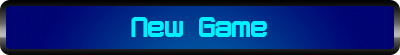
<style>
.page{position:relative;width:400px;height:55px}
.page>*{position:absolute;margin:0}
.t1{font:30px "Dopenakedfoulphat";color:#00f0ff}
</style>
<div class="page">
<p class="t1" style="left:131px;top:17px;width:136px;height:20px">New Game</p>
</div>
